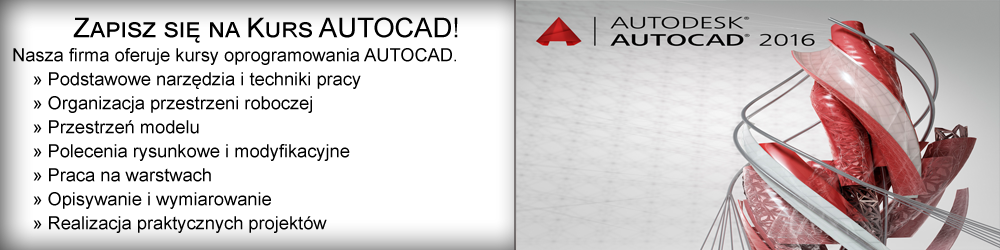
<style>
.page{position:relative;width:1000px;height:250px;background:#ffffff}
.page>*{position:absolute;margin:0}
.t1{font:18px/24px "ArialMT";color:#000000}
.t2{font:27px/24px "ArialMT";color:#000000;font-variant:small-caps}
</style>
<div class="page">
<p class="t1" style="left:13px;top:17px;width:445px;height:216px;text-align:center"><span class="t2">Zapisz się na Kurs AUTOCAD!<br></span>Nasza firma oferuje kursy oprogramowania AUTOCAD.<br>    » Podstawowe narzędzia i techniki pracy<br>    » Organizacja przestrzeni roboczej<br>    » Przestrzeń modelu<br>    » Polecenia rysunkowe i modyfikacyjne<br>    » Praca na warstwach<br>    » Opisywanie i wymiarowanie<br>    » Realizacja praktycznych projektów<br>    Najpopularniejsze profesjonalne zastosowania AutoCAD</p>
</div>
